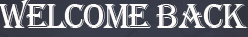
<style>
.page{position:relative;width:248px;height:37px}
.page>*{position:absolute;margin:0}
.t1{font:36px "Algerian";letter-spacing:-0.05em;color:#fdfafa}
</style>
<div class="page">
<p class="t1" style="left:0px;top:0px;width:248px;height:28px">WELCOME BACK</p>
</div>
